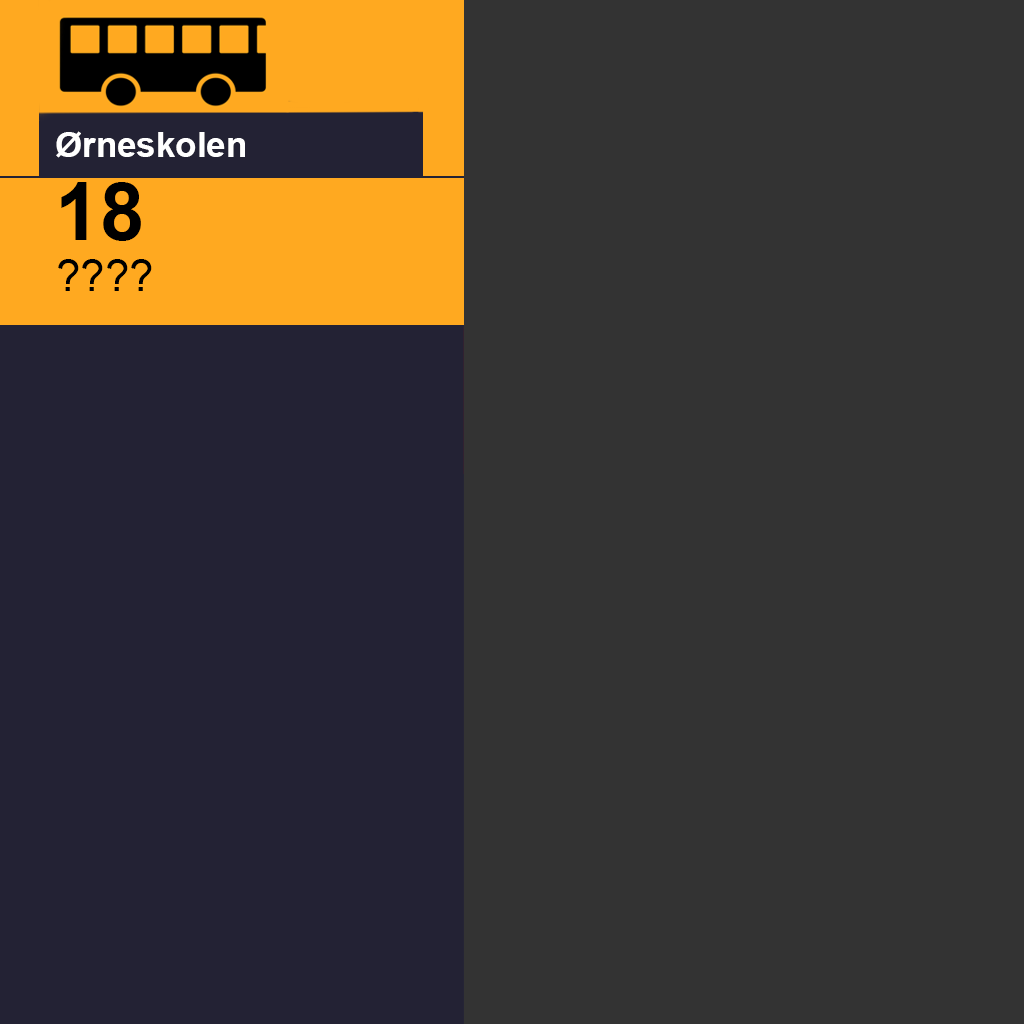
<style>
.page{position:relative;width:1024px;height:1024px;background:#333333}
.page>*{position:absolute;margin:0}
.t1{font:35px "Arial-BoldMT";color:#ffffff}
.t2{font:80px "Arial-BoldMT";color:#000000}
.t3{font:43.8px "ArialMT";color:#000000}
</style>
<div class="page">
<p class="t1" style="left:56px;top:131px;width:189px;height:27px">Ørneskolen</p>
<p class="t2" style="left:61px;top:182px;width:80px;height:59px">18</p>
<p class="t3" style="left:58px;top:259px;width:94px;height:32px">????</p>
</div>
